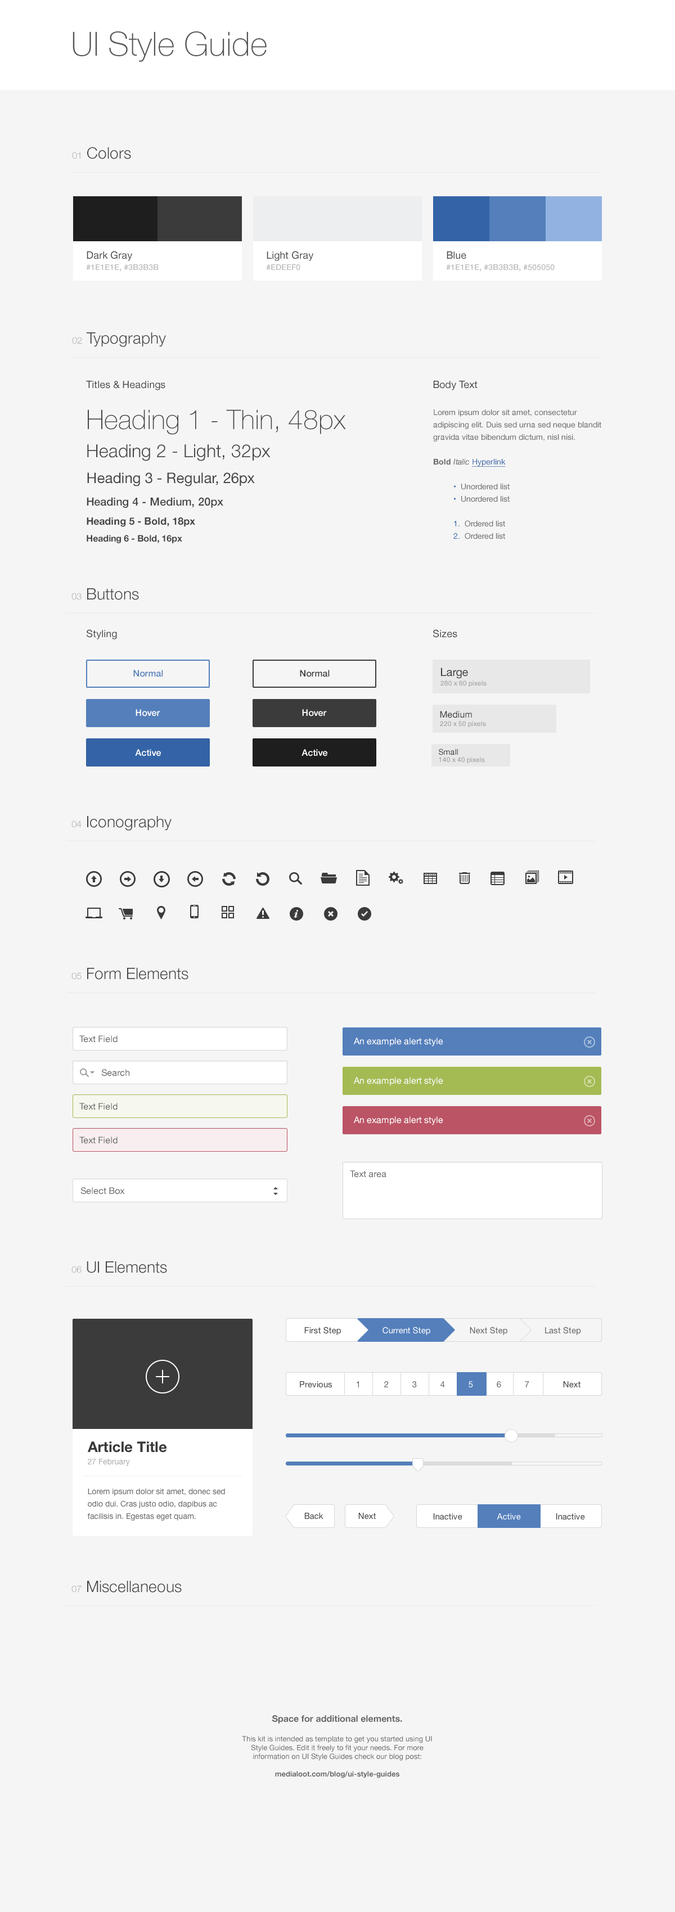
<style>
.page{position:relative;width:675px;height:1912px;background:#f5f5f5}
.page>*{position:absolute;margin:0}
.t1{font:33.2px "HelveticaNeue-Thin";color:#555555}
.t2{font:15.8px "HelveticaNeue-Light";color:#444444}
.t3{font:9px "HelveticaNeue-Light";color:#aaaaaa}
.t4{font:7.9px/11.2px "HelveticaNeue-Medium";color:#bbbbbb}
.t5{font:10.1px "HelveticaNeue";color:#444444}
.t6{font:14.6px/25.9px "HelveticaNeue";color:#444444}
.t7{font:27px/28.1px "HelveticaNeue-Thin";color:#444444}
.t8{font:18px/28.1px "HelveticaNeue-Light";color:#444444}
.t9{font:11.2px/22.5px "HelveticaNeue-Medium";color:#444444}
.t10{font:10.1px/19.1px "HelveticaNeue-Bold";color:#444444}
.t11{font:9px/16.9px "HelveticaNeue-Bold";color:#444444}
.t12{font:7.9px/12.4px "HelveticaNeue";color:#666666}
.t13{font:7.9px/12.4px "HelveticaNeue-Bold";color:#666666}
.t14{font:7.9px/12.4px "HelveticaNeue-Italic";color:#666666}
.t15{font:7.9px/12.4px "HelveticaNeue";color:#3464a7;text-decoration:underline}
.t16{font:7.9px/12.4px "HelveticaNeue";color:#3464a7}
.t17{font:9px "HelveticaNeue-Medium";color:#547fbb}
.t18{font:9px "HelveticaNeue-Medium";color:#3b3b3b}
.t19{font:11.2px "HelveticaNeue";color:#3b3b3b}
.t20{font:6.8px "HelveticaNeue-Medium";color:#a4a4a4}
.t21{font:9px "HelveticaNeue-Medium";color:#ffffff}
.t22{font:9px "HelveticaNeue";color:#3b3b3b}
.t23{font:7.9px "HelveticaNeue";color:#3b3b3b}
.t24{font:9px "HelveticaNeue";color:#666666}
.t25{font:9px "HelveticaNeue";color:#ffffff}
.t26{font:8.4px "HelveticaNeue";color:#444444}
.t27{font:8.4px "HelveticaNeue";color:#ffffff}
.t28{font:8.4px "HelveticaNeue";color:#666666}
.t29{font:14.6px/12.4px "HelveticaNeue-Bold";color:#393a3c}
.t30{font:7.9px/12.4px "HelveticaNeue";color:#aaaaaa}
.t31{font:8.4px "HelveticaNeue";color:#454545}
.t32{font:7.3px "HelveticaNeue";color:#666666}
.t33{font:9px "HelveticaNeue-Bold";color:#666666}
.t34{font:7.3px "HelveticaNeue-Bold";color:#666666}
</style>
<div class="page">
<p class="t1" style="left:73px;top:31px;width:194px;height:31px">UI Style Guide</p>
<p class="t2" style="left:72px;top:147px;width:59px;height:12px"><span class="t3">01</span> Colors</p>
<p class="t4" style="left:86px;top:251px;width:73px;height:21px"><span class="t5">Dark Gray<br></span>#1E1E1E, #3B3B3B</p>
<p class="t5" style="left:266px;top:251px;width:47px;height:20px">Light Gray<br><span class="t4">#EDEEF0</span></p>
<p class="t4" style="left:446px;top:251px;width:109px;height:21px"><span class="t5">Blue<br></span>#1E1E1E, #3B3B3B, #505050</p>
<p class="t2" style="left:72px;top:332px;width:94px;height:15px"><span class="t3">02</span> Typography</p>
<p class="t5" style="left:86px;top:381px;width:79px;height:9px">Titles &amp; Headings</p>
<p class="t5" style="left:433px;top:381px;width:45px;height:9px">Body Text</p>
<p class="t6" style="left:87px;top:410px;width:259px;height:133px"><span class="t7">Heading 1 - Thin, 48px<br></span><span class="t8">Heading 2 - Light, 32px<br></span>Heading 3 - Regular, 26px<br><span class="t9">Heading 4 - Medium, 20px<br></span><span class="t10">Heading 5 - Bold, 18px<br></span><span class="t11">Heading 6 - Bold, 16px</span></p>
<p class="t12" style="left:433px;top:410px;width:168px;height:129px">Lorem ipsum dolor sit amet, consectetur adipiscing elit. Duis sed urna sed neque blandit gravida vitae bibendum dictum, nisl nisi.<br><br><span class="t13">Bold </span><span class="t14">Italic </span><span class="t15">Hyperlink <br><br> </span><span class="t16">•</span>  Unordered list<br> <span class="t16">•</span>  Unordered list<br><br> <span class="t16">1.</span>  Ordered list<br> <span class="t16">2.</span>  Ordered list</p>
<p class="t2" style="left:71px;top:588px;width:68px;height:12px"><span class="t3">03</span> Buttons</p>
<p class="t5" style="left:87px;top:629px;width:30px;height:11px">Styling</p>
<p class="t5" style="left:433px;top:629px;width:24px;height:9px">Sizes</p>
<p class="t17" style="left:133px;top:670px;width:30px;height:7px">Normal</p>
<p class="t18" style="left:300px;top:670px;width:30px;height:7px">Normal</p>
<p class="t19" style="left:441px;top:668px;width:27px;height:11px">Large</p>
<p class="t20" style="left:440px;top:681px;width:47px;height:6px">280 x 60 pixels</p>
<p class="t21" style="left:136px;top:709px;width:24px;height:8px">Hover</p>
<p class="t21" style="left:302px;top:709px;width:25px;height:8px">Hover</p>
<p class="t22" style="left:440px;top:711px;width:32px;height:7px">Medium</p>
<p class="t20" style="left:440px;top:721px;width:46px;height:7px">220 x 50 pixels</p>
<p class="t21" style="left:135px;top:749px;width:26px;height:8px">Active</p>
<p class="t21" style="left:302px;top:749px;width:25px;height:8px">Active</p>
<p class="t23" style="left:439px;top:749px;width:19px;height:6px">Small</p>
<p class="t20" style="left:439px;top:757px;width:46px;height:7px">140 x 40 pixels</p>
<p class="t2" style="left:71px;top:816px;width:101px;height:15px"><span class="t3">04</span> Iconography</p>
<p class="t2" style="left:71px;top:968px;width:117px;height:12px"><span class="t3">05</span> Form Elements</p>
<p class="t24" style="left:79px;top:1036px;width:39px;height:7px">Text Field</p>
<p class="t25" style="left:354px;top:1038px;width:89px;height:9px">An example alert style</p>
<p class="t24" style="left:101px;top:1069px;width:28px;height:8px">Search</p>
<p class="t25" style="left:354px;top:1077px;width:89px;height:9px">An example alert style</p>
<p class="t24" style="left:79px;top:1103px;width:39px;height:7px">Text Field</p>
<p class="t25" style="left:354px;top:1117px;width:89px;height:9px">An example alert style</p>
<p class="t24" style="left:79px;top:1137px;width:39px;height:7px">Text Field</p>
<p class="t24" style="left:350px;top:1171px;width:36px;height:7px">Text area</p>
<p class="t24" style="left:80px;top:1187px;width:45px;height:8px">Select Box</p>
<p class="t2" style="left:71px;top:1262px;width:96px;height:12px"><span class="t3">06</span> UI Elements</p>
<p class="t26" style="left:304px;top:1327px;width:37px;height:8px">First Step</p>
<p class="t27" style="left:382px;top:1327px;width:48px;height:8px">Current Step</p>
<p class="t28" style="left:470px;top:1327px;width:37px;height:8px">Next Step</p>
<p class="t28" style="left:545px;top:1327px;width:36px;height:8px">Last Step</p>
<p class="t26" style="left:300px;top:1382px;width:32px;height:6px">Previous</p>
<p class="t28" style="left:357px;top:1382px;width:2px;height:6px">1</p>
<p class="t28" style="left:384px;top:1382px;width:4px;height:6px">2</p>
<p class="t28" style="left:412px;top:1382px;width:5px;height:6px">3</p>
<p class="t28" style="left:440px;top:1382px;width:5px;height:6px">4</p>
<p class="t27" style="left:469px;top:1382px;width:4px;height:6px">5</p>
<p class="t28" style="left:497px;top:1382px;width:4px;height:6px">6</p>
<p class="t28" style="left:525px;top:1382px;width:4px;height:6px">7</p>
<p class="t26" style="left:563px;top:1382px;width:17px;height:6px">Next</p>
<p class="t29" style="left:88px;top:1442px;width:79px;height:24px">Article Title<br><span class="t30">27 February</span></p>
<p class="t12" style="left:87px;top:1489px;width:138px;height:32px">Lorem ipsum dolor sit amet, donec sed odio dui. Cras justo odio, dapibus ac facilisis in. Egestas eget quam.</p>
<p class="t31" style="left:304px;top:1513px;width:19px;height:7px">Back</p>
<p class="t31" style="left:358px;top:1513px;width:18px;height:7px">Next</p>
<p class="t31" style="left:433px;top:1514px;width:29px;height:6px">Inactive</p>
<p class="t27" style="left:497px;top:1514px;width:24px;height:6px">Active</p>
<p class="t31" style="left:556px;top:1514px;width:29px;height:6px">Inactive</p>
<p class="t2" style="left:71px;top:1581px;width:111px;height:12px"><span class="t3">07</span> Miscellaneous</p>
<p class="t32" style="left:242px;top:1716px;width:190px;height:63px;text-align:center"><span class="t33">Space for additional elements.<br><br></span>This kit is intended as template to get you started using UI Style Guides. Edit it freely to fit your needs. For more information on UI Style Guides check our blog post:<br><br><span class="t34">medialoot.com/blog/ui-style-guides</span></p>
</div>
